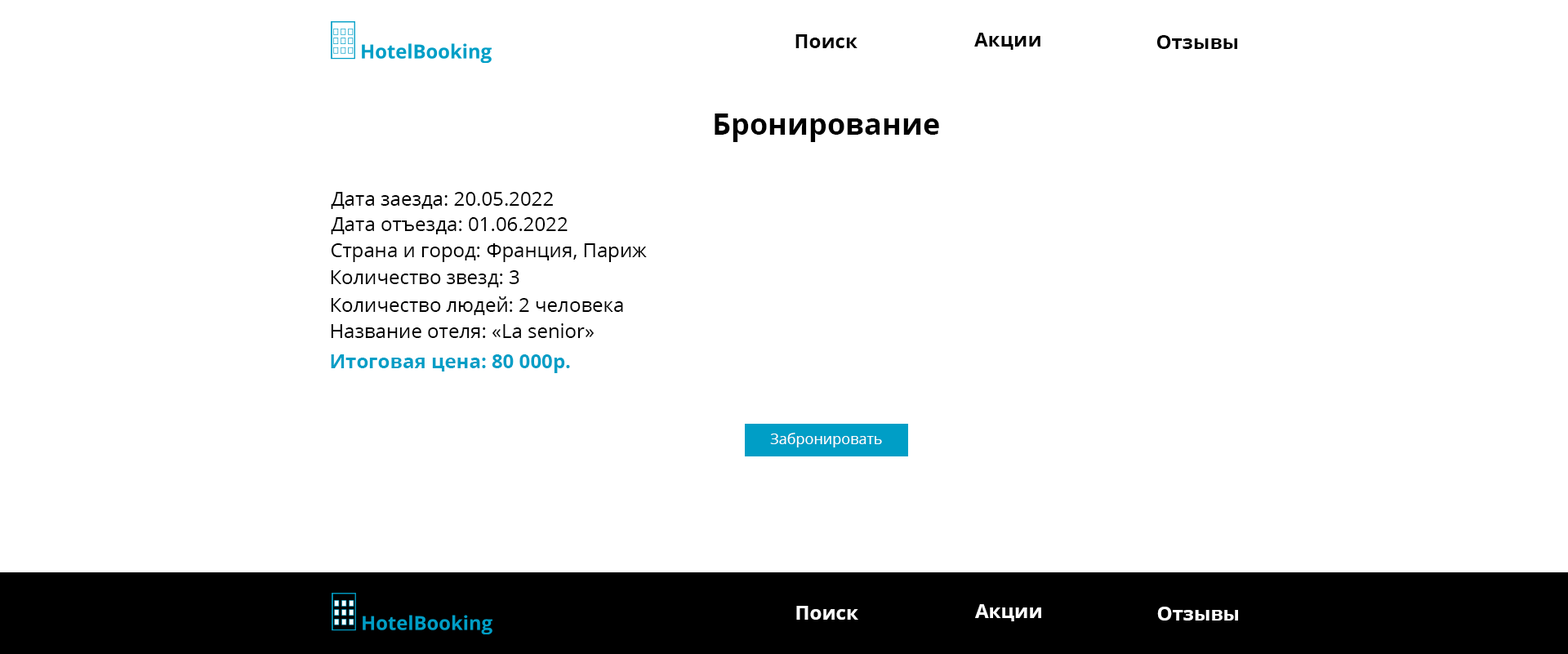
<style>
.page{position:relative;width:1568px;height:654px;background:#ffffff}
.page>*{position:absolute;margin:0}
.t1{font:19.6px "OpenSans-Bold";color:#000000}
.t2{font:29.4px "OpenSans-Bold";color:#000000}
.t3{font:19.6px "OpenSans-Regular";color:#000000}
.t4{font:19.6px "OpenSans-Bold";color:#009ec6}
.t5{font:14.7px "OpenSans-Regular";color:#ffffff}
.t6{font:19.6px "OpenSans-Bold";color:#ffffff}
</style>
<div class="page">
<p class="t1" style="left:795px;top:34px;width:63px;height:14px">Поиск</p>
<p class="t1" style="left:974px;top:33px;width:66px;height:17px">Акции</p>
<p class="t1" style="left:1156px;top:35px;width:81px;height:14px">Отзывы</p>
<p class="t2" style="left:715px;top:114px;width:224px;height:28px">Бронирование</p>
<p class="t3" style="left:331px;top:192px;width:222px;height:17px">Дата заезда: 20.05.2022</p>
<p class="t3" style="left:331px;top:217px;width:237px;height:17px">Дата отъезда: 01.06.2022</p>
<p class="t3" style="left:331px;top:243px;width:316px;height:19px">Страна и город: Франция, Париж</p>
<p class="t3" style="left:331px;top:270px;width:188px;height:17px">Количество звезд: 3</p>
<p class="t3" style="left:331px;top:296px;width:292px;height:19px">Количество людей: 2 человека</p>
<p class="t3" style="left:331px;top:323px;width:263px;height:15px">Название отеля: «La senior»</p>
<p class="t4" style="left:331px;top:354px;width:239px;height:19px">Итоговая цена: 80 000р.</p>
<p class="t5" style="left:770px;top:433px;width:112px;height:15px">Забронировать</p>
<p class="t6" style="left:796px;top:606px;width:62px;height:14px">Поиск</p>
<p class="t6" style="left:975px;top:604px;width:66px;height:17px">Акции</p>
<p class="t6" style="left:1157px;top:607px;width:81px;height:14px">Отзывы</p>
</div>
